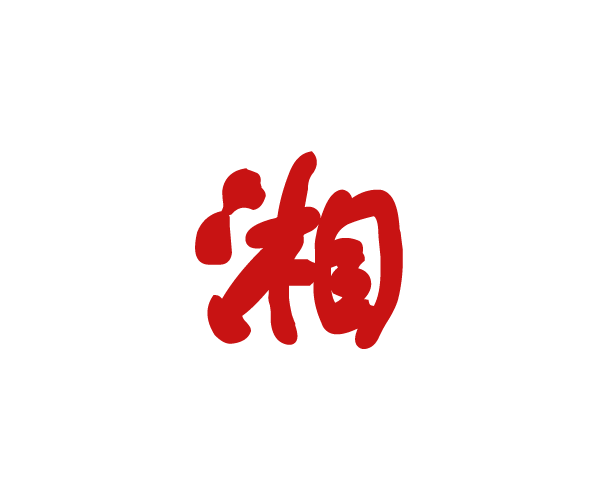
<style>
.page{position:relative;width:600px;height:500px;background:#ffffff}
.page>*{position:absolute;margin:0}
.t1{font:270px "FZSTK--GBK1-0";letter-spacing:-0.015em;color:#c81313;font-weight:bold}
</style>
<div class="page">
<p class="t1" style="left:195px;top:151px;width:208px;height:198px">湘</p>
</div>
